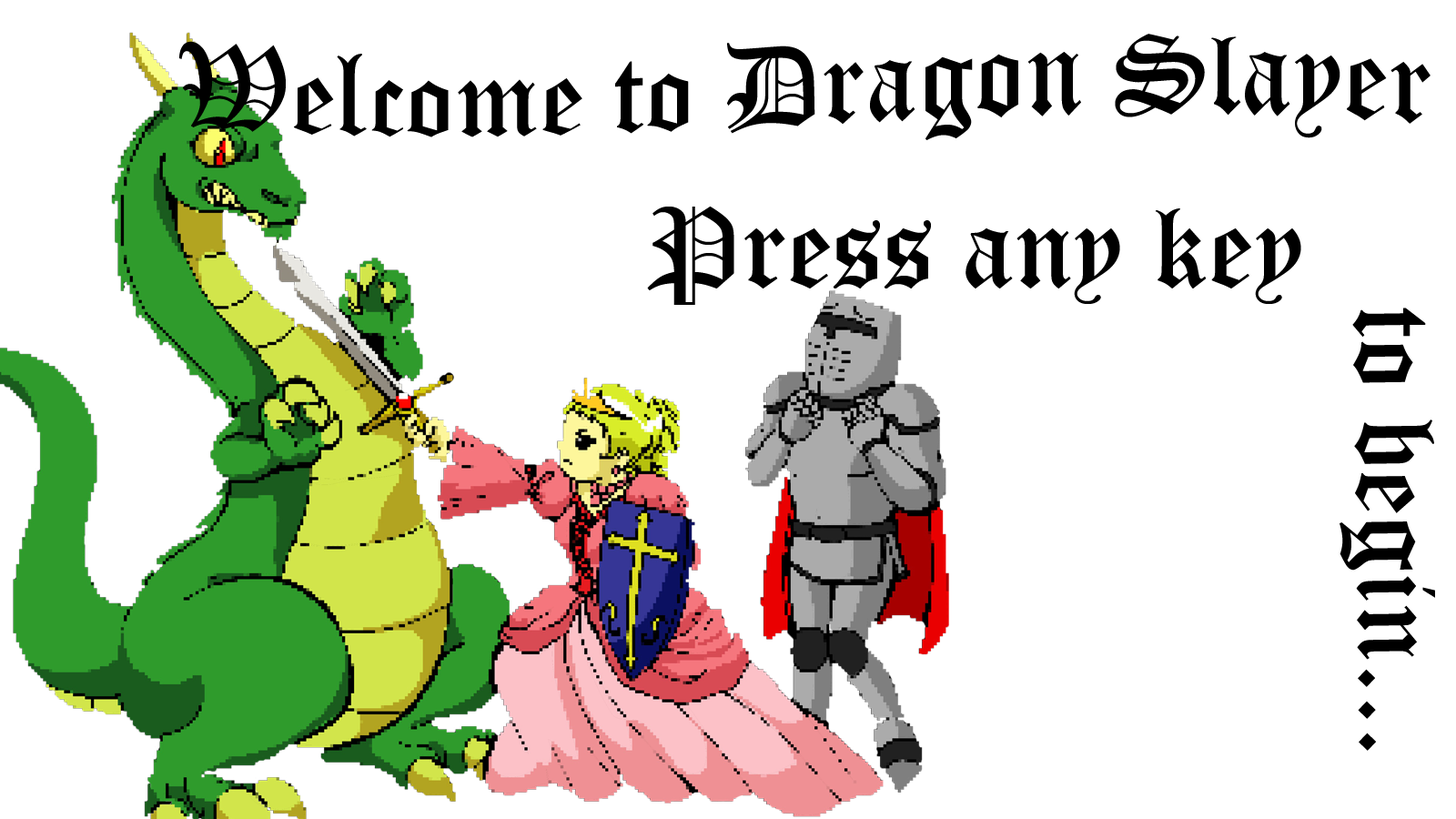
<style>
.page{position:relative;width:1456px;height:819px;background:#ffffff}
.page>*{position:absolute;margin:0}
.t1{font:113.7px "OldEnglishTextMT";color:#000000}
</style>
<div class="page">
<p class="t1" style="left:179px;top:34px;width:1252px;height:106px">Welcome to Dragon Slayer</p>
<p class="t1" style="left:647px;top:207px;width:654px;height:98px">Press any key</p>
<p class="t1" style="left:1340px;top:308px;width:95px;height:443px;rotate:89deg">to begin...</p>
</div>
